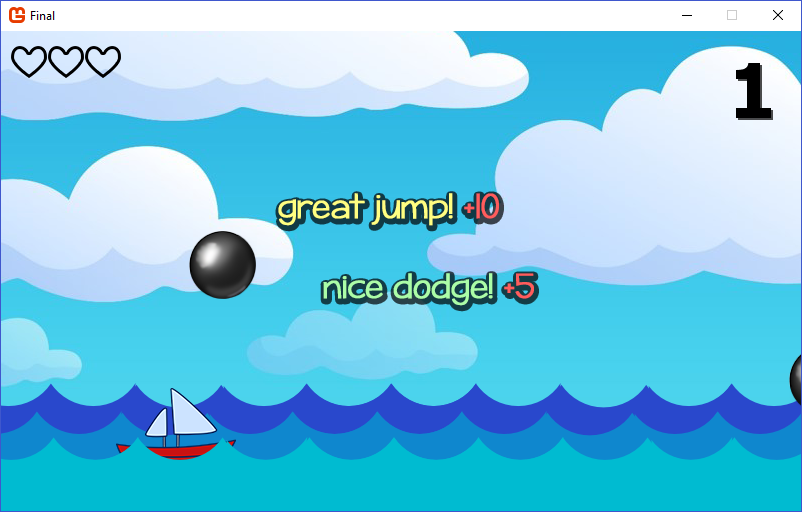
<style>
.page{position:relative;width:802px;height:512px}
.page>*{position:absolute;margin:0}
.t1{font:30px "KGPayphone";color:#fffe81;font-weight:bold}
.t2{font:30px "KGPayphone";color:#ff5c5c;font-weight:bold}
.t3{font:30px "KGPayphone";color:#abfda7;font-weight:bold}
</style>
<div class="page">
<p class="t1" style="left:278px;top:193px;width:221px;height:33px">great jump! <span class="t2">+10</span></p>
<p class="t3" style="left:323px;top:273px;width:211px;height:33px">nice dodge! <span class="t2">+5</span></p>
</div>
